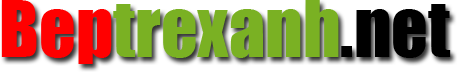
<style>
.page{position:relative;width:458px;height:72px;background:#7ab123}
.page>*{position:absolute;margin:0}
.t1{font:72px "Impact";color:#7ab123}
.t2{font:72px "Impact";color:#ff0000}
.t3{font:72px "Impact";color:#000000}
</style>
<div class="page">
<p class="t1" style="left:1px;top:0px;width:450px;height:64px"><span class="t2">Bep</span>trexanh<span class="t3">.net</span></p>
</div>
